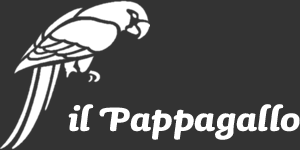
<style>
.page{position:relative;width:300px;height:150px;background:#333333}
.page>*{position:absolute;margin:0}
.t1{font:42.7px "Sauna-BoldItalicSwash";color:#ffffff}
</style>
<div class="page">
<p class="t1" style="left:68px;top:104px;width:232px;height:36px">il Pappagallo</p>
</div>
